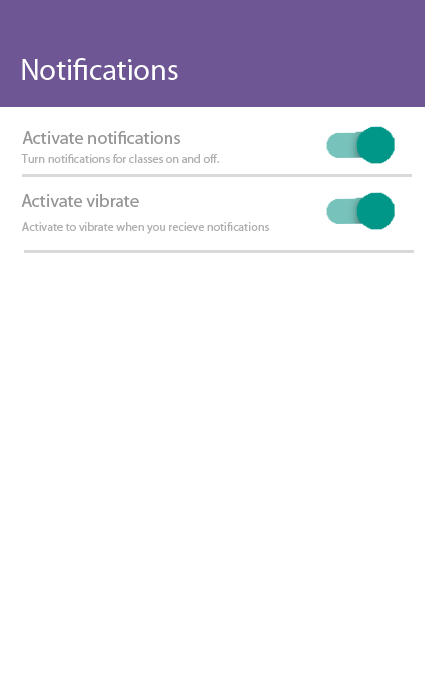
<style>
.page{position:relative;width:425px;height:700px;background:#ffffff}
.page>*{position:absolute;margin:0}
.t1{font:30px "MyriadPro-Regular";color:#ffffff}
.t2{font:18px "MyriadPro-Regular";color:#969696}
.t3{font:12px "MyriadPro-Regular";color:#b0b0b0}
</style>
<div class="page">
<p class="t1" style="left:22px;top:58px;width:156px;height:22px">Notifications</p>
<p class="t2" style="left:22px;top:131px;width:158px;height:13px">Activate notifications</p>
<p class="t3" style="left:21px;top:154px;width:198px;height:9px">Turn notifications for classes on and off.</p>
<p class="t2" style="left:21px;top:194px;width:118px;height:13px">Activate vibrate</p>
<p class="t3" style="left:22px;top:222px;width:247px;height:12px">Activate to vibrate when you recieve notifications</p>
</div>
